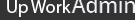
<style>
.page{position:relative;width:135px;height:20px;background:#333333}
.page>*{position:absolute;margin:0}
.t1{font:18px "MyriadPro-Regular";color:#ffffff}
</style>
<div class="page">
<p class="t1" style="left:7px;top:0px;width:64px;height:17px">Up Work</p>
</div>
